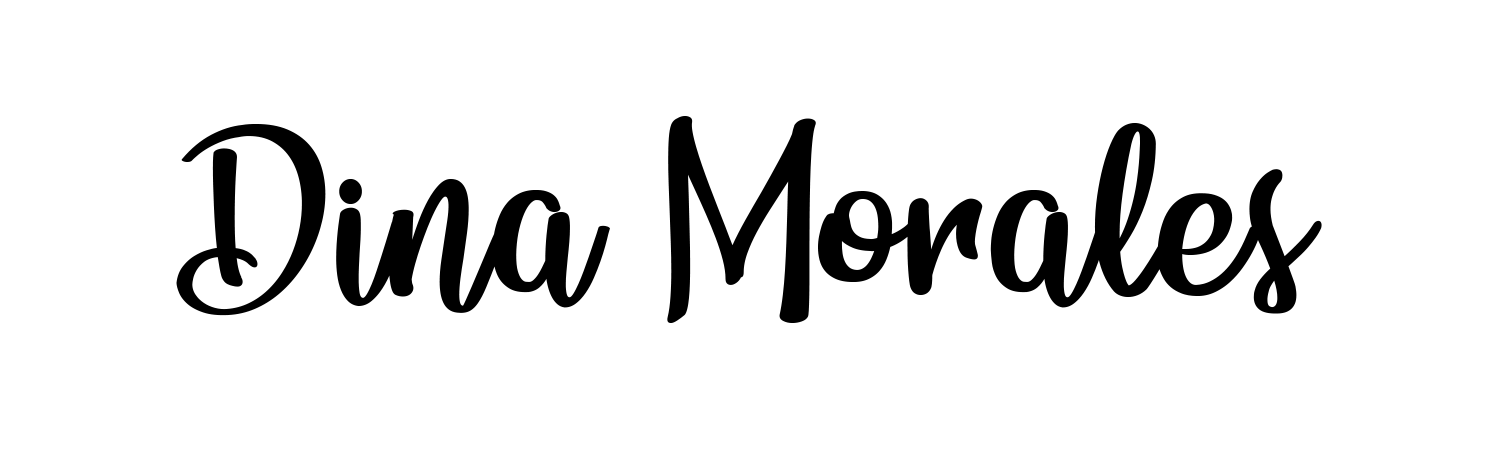
<style>
.page{position:relative;width:1498px;height:455px;background:#ffffff}
.page>*{position:absolute;margin:0}
.t1{font:180.6px "BunchBlossomsPersonalUse";letter-spacing:0.02em;color:#000000}
</style>
<div class="page">
<p class="t1" style="left:176px;top:116px;width:1146px;height:207px">Dina Morales</p>
</div>
